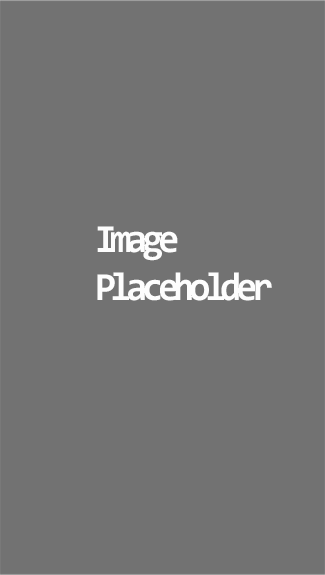
<style>
.page{position:relative;width:325px;height:575px;background:#727272}
.page>*{position:absolute;margin:0}
.t1{font:39.9px "Consolas-Bold";letter-spacing:-0.143em;color:#fdfdfd;scale:0.97 1}
</style>
<div class="page">
<p class="t1" style="left:97px;top:226px;width:175px;height:75px">Image<br>Placeholder</p>
</div>
